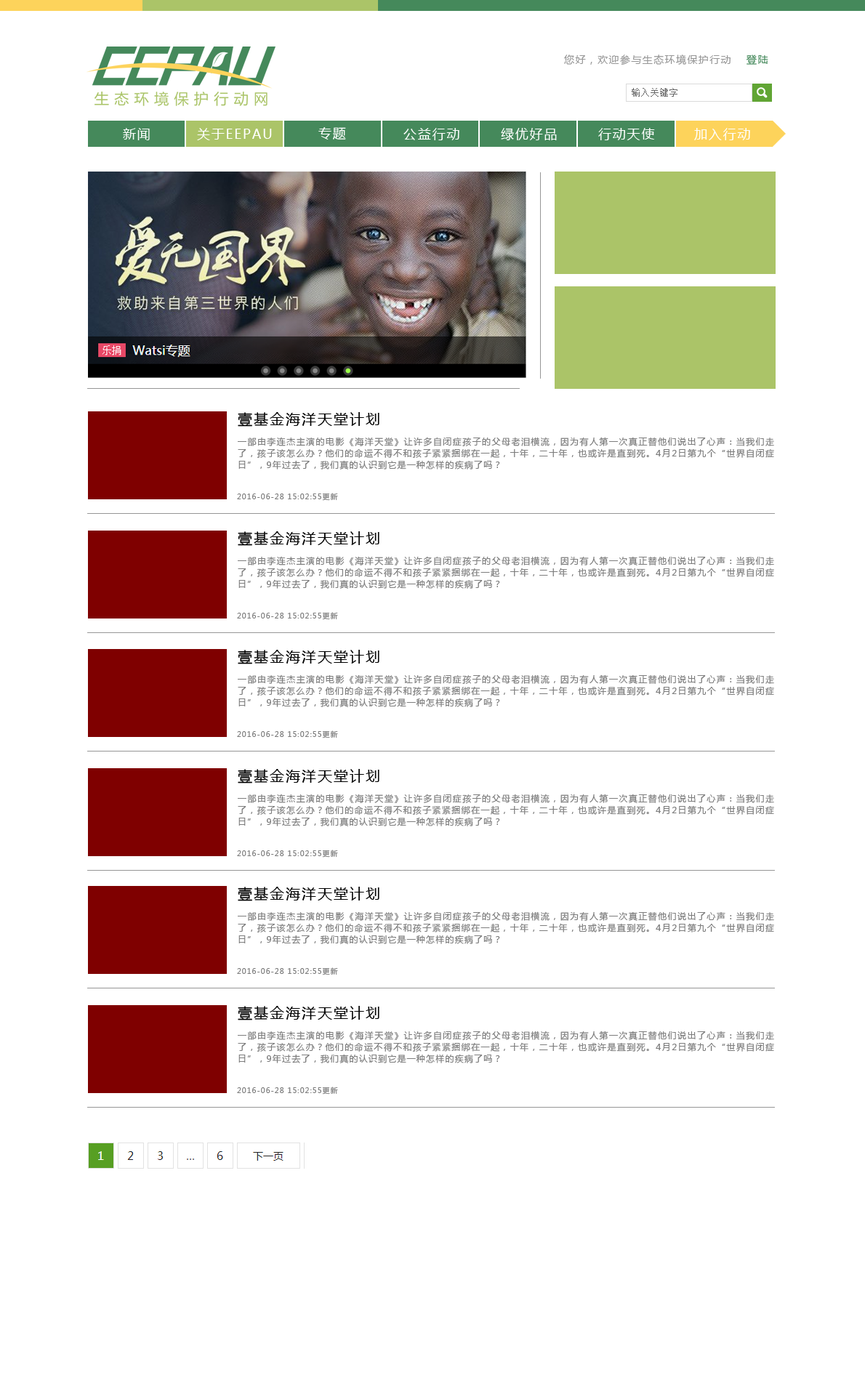
<style>
.page{position:relative;width:865px;height:1378px;background:#ffffff}
.page>*{position:absolute;margin:0}
.t1{font:10.2px "MicrosoftYaHei";letter-spacing:0.1em;color:#969696}
.t2{font:10.2px "MicrosoftYaHei";letter-spacing:0.1em;color:#45895b}
.t3{font:13.1px "MicrosoftYaHei";letter-spacing:0.1em;color:#ffffff}
.t4{font:14.5px "MicrosoftYaHei";letter-spacing:0.1em;color:#000000}
.t5{font:8.7px/11.6px "MicrosoftYaHei";letter-spacing:0.1em;color:#7d7d7d}
.t6{font:7.3px "MicrosoftYaHei";letter-spacing:0.1em;color:#7d7d7d}
</style>
<div class="page">
<p class="t1" style="left:564px;top:55px;width:167px;height:10px">您好，欢迎参与生态环境保护行动</p>
<p class="t2" style="left:747px;top:55px;width:21px;height:10px">登陆</p>
<p class="t3" style="left:123px;top:128px;width:27px;height:12px">新闻</p>
<p class="t3" style="left:197px;top:128px;width:75px;height:12px">关于EEPAU</p>
<p class="t3" style="left:318px;top:127px;width:28px;height:13px">专题</p>
<p class="t3" style="left:403px;top:128px;width:56px;height:12px">公益行动</p>
<p class="t3" style="left:501px;top:128px;width:56px;height:13px">绿优好品</p>
<p class="t3" style="left:598px;top:128px;width:57px;height:12px">行动天使</p>
<p class="t3" style="left:694px;top:128px;width:56px;height:12px">加入行动</p>
<p class="t4" style="left:238px;top:412px;width:141px;height:15px">壹基金海洋天堂计划</p>
<p class="t5" style="left:238px;top:437px;width:536px;height:33px;text-align:justify">一部由李连杰主演的电影《海洋天堂》让许多自闭症孩子的父母老泪横流，因为有人第一次真正替他们说出了心声：当我们走了，孩子该怎么办？他们的命运不得不和孩子紧紧捆绑在一起，十年，二十年，也或许是直到死。4月2日第九个“世界自闭症日”，9年过去了，我们真的认识到它是一种怎样的疾病了吗？</p>
<p class="t6" style="left:237px;top:493px;width:101px;height:8px">2016-06-28 15:02:55更新</p>
<p class="t4" style="left:238px;top:531px;width:141px;height:15px">壹基金海洋天堂计划</p>
<p class="t5" style="left:238px;top:556px;width:536px;height:33px;text-align:justify">一部由李连杰主演的电影《海洋天堂》让许多自闭症孩子的父母老泪横流，因为有人第一次真正替他们说出了心声：当我们走了，孩子该怎么办？他们的命运不得不和孩子紧紧捆绑在一起，十年，二十年，也或许是直到死。4月2日第九个“世界自闭症日”，9年过去了，我们真的认识到它是一种怎样的疾病了吗？</p>
<p class="t6" style="left:237px;top:612px;width:101px;height:8px">2016-06-28 15:02:55更新</p>
<p class="t4" style="left:238px;top:650px;width:141px;height:14px">壹基金海洋天堂计划</p>
<p class="t5" style="left:238px;top:675px;width:536px;height:32px;text-align:justify">一部由李连杰主演的电影《海洋天堂》让许多自闭症孩子的父母老泪横流，因为有人第一次真正替他们说出了心声：当我们走了，孩子该怎么办？他们的命运不得不和孩子紧紧捆绑在一起，十年，二十年，也或许是直到死。4月2日第九个“世界自闭症日”，9年过去了，我们真的认识到它是一种怎样的疾病了吗？</p>
<p class="t6" style="left:237px;top:731px;width:101px;height:8px">2016-06-28 15:02:55更新</p>
<p class="t4" style="left:238px;top:769px;width:141px;height:15px">壹基金海洋天堂计划</p>
<p class="t5" style="left:238px;top:794px;width:536px;height:33px;text-align:justify">一部由李连杰主演的电影《海洋天堂》让许多自闭症孩子的父母老泪横流，因为有人第一次真正替他们说出了心声：当我们走了，孩子该怎么办？他们的命运不得不和孩子紧紧捆绑在一起，十年，二十年，也或许是直到死。4月2日第九个“世界自闭症日”，9年过去了，我们真的认识到它是一种怎样的疾病了吗？</p>
<p class="t6" style="left:237px;top:850px;width:101px;height:8px">2016-06-28 15:02:55更新</p>
<p class="t4" style="left:238px;top:887px;width:141px;height:14px">壹基金海洋天堂计划</p>
<p class="t5" style="left:238px;top:912px;width:536px;height:32px;text-align:justify">一部由李连杰主演的电影《海洋天堂》让许多自闭症孩子的父母老泪横流，因为有人第一次真正替他们说出了心声：当我们走了，孩子该怎么办？他们的命运不得不和孩子紧紧捆绑在一起，十年，二十年，也或许是直到死。4月2日第九个“世界自闭症日”，9年过去了，我们真的认识到它是一种怎样的疾病了吗？</p>
<p class="t6" style="left:237px;top:968px;width:101px;height:8px">2016-06-28 15:02:55更新</p>
<p class="t4" style="left:238px;top:1006px;width:141px;height:15px">壹基金海洋天堂计划</p>
<p class="t5" style="left:238px;top:1031px;width:536px;height:33px;text-align:justify">一部由李连杰主演的电影《海洋天堂》让许多自闭症孩子的父母老泪横流，因为有人第一次真正替他们说出了心声：当我们走了，孩子该怎么办？他们的命运不得不和孩子紧紧捆绑在一起，十年，二十年，也或许是直到死。4月2日第九个“世界自闭症日”，9年过去了，我们真的认识到它是一种怎样的疾病了吗？</p>
<p class="t6" style="left:237px;top:1087px;width:101px;height:8px">2016-06-28 15:02:55更新</p>
</div>
